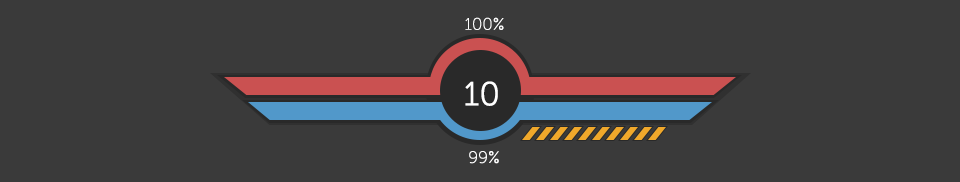
<style>
.page{position:relative;width:960px;height:182px;background:#3a3a3a}
.page>*{position:absolute;margin:0}
.t1{font:16.7px "MuseoSans-100";color:#ffffff}
.t2{font:33.3px "MuseoSans-300";color:#ffffff}
</style>
<div class="page">
<p class="t1" style="left:465px;top:17px;width:39px;height:13px">100%</p>
<p class="t2" style="left:465px;top:81px;width:33px;height:25px">10</p>
<p class="t1" style="left:469px;top:151px;width:30px;height:13px">99%</p>
</div>
